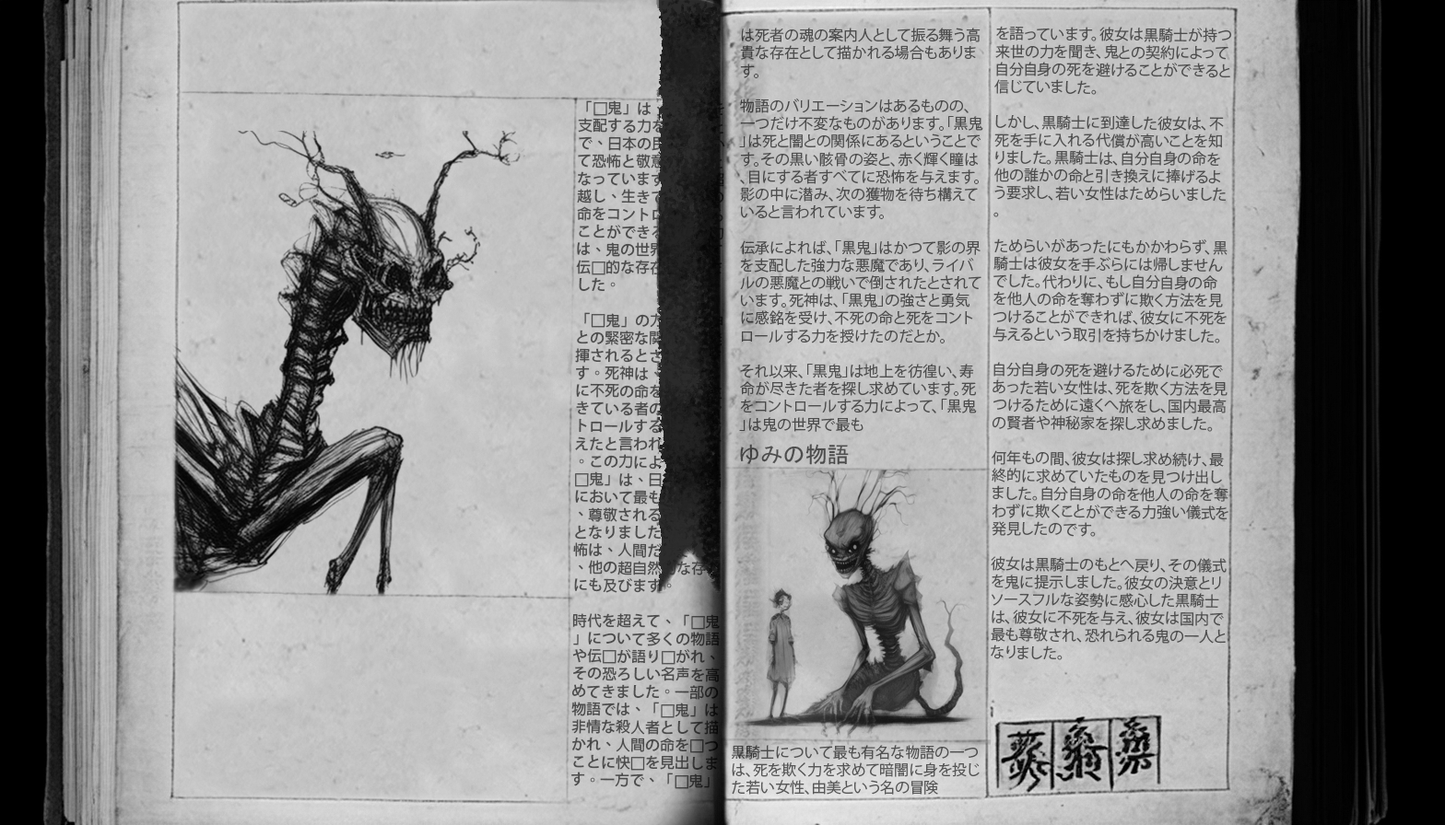
<style>
.page{position:relative;width:1445px;height:825px}
.page>*{position:absolute;margin:0}
.t1{font:14.7px "KozGoPr6N-Regular";color:#4d4d4d}
.t2{font:14.7px "AdobeFanHeitiStd-Bold"}
.t3{font:14.7px "MingLiU-ExtB"}
.t4{font:22.1px "MS-PGothic";color:#4d4d4d}
.t5{font:14.7px "KozGoPr6N-Regular";color:#565656}
</style>
<div class="page">
<p class="t1" style="left:739px;top:28px;width:244px;height:404px">は死者の魂の案内人として振る舞う高貴な存在として描かれる場合もあります。<br><br>物語のバリエーションはあるものの、一つだけ不変なものがあります。「黒鬼」は死と闇との関係にあるということです。その黒い骸骨の姿と、赤く輝く瞳は、目にする者すべてに恐怖を与えます。影の中に潜み、次の獲物を待ち構えていると言われています。<br><br>伝承によれば、「黒鬼」はかつて影の界を支配した強力な悪魔であり、ライバルの悪魔との戦いで倒されたとされています。死神は、「黒鬼」の強さと勇気に感銘を受け、不死の命と死をコントロールする力を授けたのだとか。<br><br>それ以来、「黒鬼」は地上を彷徨い、寿命が尽きた者を探し求めています。死をコントロールする力によって、「黒鬼」は鬼の世界で最も</p>
<p class="t1" style="left:990px;top:26px;width:241px;height:635px">を語っています。彼女は黒騎士が持つ来世の力を聞き、鬼との契約によって自分自身の死を避けることができると信じていました。<br><br>しかし、黒騎士に到達した彼女は、不死を手に入れる代償が高いことを知りました。黒騎士は、自分自身の命を他の誰かの命と引き換えに捧げるよう要求し、若い女性はためらいました。<br><br>ためらいがあったにもかかわらず、黒騎士は彼女を手ぶらには帰しませんでした。代わりに、もし自分自身の命を他人の命を奪わずに欺く方法を見つけることができれば、彼女に不死を与えるという取引を持ちかけました。<br><br>自分自身の死を避けるために必死であった若い女性は、死を欺く方法を見つけるために遠くへ旅をし、国内最高の賢者や神秘家を探し求めました。<br><br>何年もの間、彼女は探し求め続け、最終的に求めていたものを見つけ出しました。自分自身の命を他人の命を奪わずに欺くことができる力強い儀式を発見したのです。<br><br>彼女は黒騎士のもとへ戻り、その儀式を鬼に提示しました。彼女の決意とリソースフルな姿勢に感心した黒騎士は、彼女に不死を与え、彼女は国内で最も尊敬され、恐れられる鬼の一人となりました。<br><br><br><br><br><br><br><br><br><br><br><br><br><br><br><br><br><br>しかしながら、このような力の代償は高く、それを求める者は最終的な代償を払う覚悟が必要です。黒騎士に</p>
<p class="t2" style="left:571px;top:100px;width:154px;height:690px;rotate:1deg">「<span class="t3">黒</span>鬼」は、死と闇を支配する力を持つことで、日本の民話において恐怖と敬意の象<span class="t3">徴</span>となっています。死を超越し、生きている者の命をコントロールすることができるこの能力は、鬼の世界において伝<span class="t3">説</span>的な存在となりました。<br><br>「<span class="t3">黒</span>鬼」の力は、死神との緊密な関係から発揮されるとされています。死神は、「<span class="t3">黒</span>鬼」に不死の命を授け、生きている者の命をコントロールする能力を与えたと言われています。この力によって、「<span class="t3">黒</span>鬼」は、日本の神話において最も恐れられ、尊敬される鬼の一人となりました。その恐怖は、人間だけでなく、他の超自然的な存在にも及びます。<br><br>時代を超えて、「<span class="t3">黒</span>鬼」について多くの物語や伝<span class="t3">説</span>が語り<span class="t3">継</span>がれ、その恐ろしい名声を高めてきました。一部の物語では、「<span class="t3">黒</span>鬼」は非情な殺人者として描かれ、人間の命を<span class="t3">絶</span>つことに快<span class="t3">楽</span>を見出します。一方で、「<span class="t3">黒</span>鬼」は死者の魂の案<span class="t3">内</span>人として振る舞う高貴な存在として描かれる場合もあります。<br><br>物語のバリエーションはあるものの、一つだけ不<span class="t3">変</span>なものがあります。「<span class="t3">黒</span>鬼」は死と闇との関係にあるということです。その<span class="t3">黒</span>い骸骨の姿と、赤く輝く瞳は、目にする者すべてに恐怖を与えます。影の中に潜み、次の獲物を待ち構えていると言われています。<br><br>伝承によれば、「<span class="t3">黒</span>鬼」はかつて影の界を支配した強力な<span class="t3">悪</span>魔であり、ライバルの<span class="t3">悪</span>魔との<span class="t3">戦</span>いで倒されたとされています。死神は、「<span class="t3">黒</span>鬼」の強さと勇<span class="t3">気</span>に感銘を受け、不死の命と死をコントロールする力を授けたのだとか。<br><br>それ以<span class="t3">来</span>、「<span class="t3">黒</span>鬼」は地上を彷徨い、寿命が<span class="t3">尽</span>きた者を探し求めています。死をコントロールする力によって、「<span class="t3">黒</span>鬼」は鬼の世界で最も</p>
<p class="t4" style="left:740px;top:444px;width:108px;height:21px">ゆみの物語</p>
<p class="t5" style="left:731px;top:745px;width:248px;height:50px">黒騎士について最も有名な物語の一つは、死を欺く力を求めて暗闇に身を投じた若い女性、由美という名の冒険</p>
</div>
